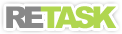
<style>
.page{position:relative;width:122px;height:34px;background:#ffffff}
.page>*{position:absolute;margin:0}
.t1{font:30px "Arial-Black";letter-spacing:-0.15em;color:#b0d64f}
.t2{font:30px "Arial-Black";letter-spacing:-0.15em;color:#888888}
</style>
<div class="page">
<p class="t1" style="left:6px;top:6px;width:111px;height:23px"><span class="t2">RE</span>TASK</p>
</div>
